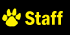
<style>
.page{position:relative;width:70px;height:35px;background:#000000}
.page>*{position:absolute;margin:0}
.t1{font:20px "FranklinGotT-DemCon";color:#fff100}
</style>
<div class="page">
<p class="t1" style="left:25px;top:11px;width:38px;height:14px">Staff</p>
</div>
